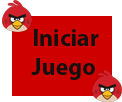
<style>
.page{position:relative;width:122px;height:102px;background:#cf0000}
.page>*{position:absolute;margin:0}
.t1{font:24px "MyriadPro-Bold";color:#150f0f}
.t2{font:12px "MyriadPro-Regular";color:#e90000}
</style>
<div class="page">
<p class="t1" style="left:31px;top:29px;width:68px;height:51px"><span class="t2">      </span>Iniciar<br>   Juego</p>
</div>
